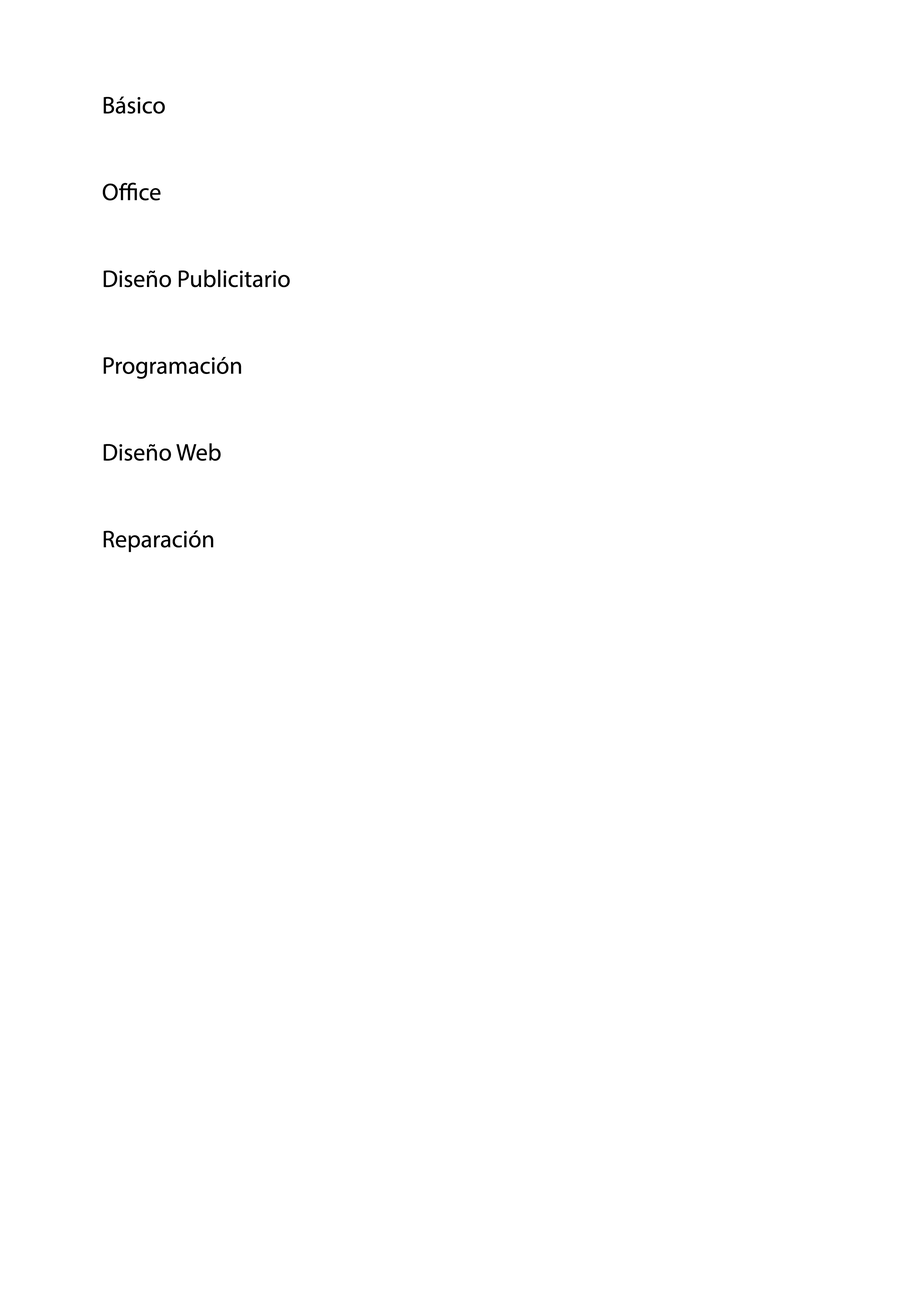
<style>
.page{position:relative;width:918px;height:1299px;background:#ffffff}
.page>*{position:absolute;margin:0}
.t1{font:24.1px "MyriadPro-Regular";color:#000000}
</style>
<div class="page">
<p class="t1" style="left:103px;top:96px;width:187px;height:456px">Básico<br><br><br>Office<br><br><br>Diseño Publicitario<br><br><br>Programación<br><br><br>Diseño Web<br><br><br>Reparación</p>
</div>
